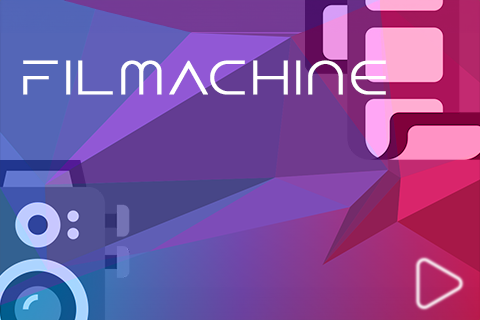
<style>
.page{position:relative;width:480px;height:320px}
.page>*{position:absolute;margin:0}
.t1{font:41.7px "Dune_Rise";color:#ffffff;font-weight:bold}
</style>
<div class="page">
<p class="t1" style="left:23px;top:60px;width:363px;height:35px">FILMACHIne</p>
</div>
